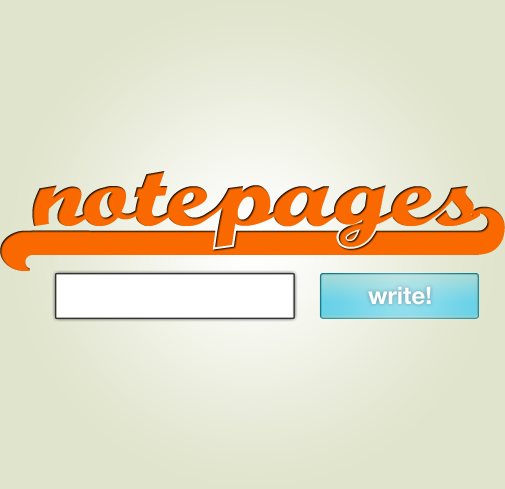
<style>
.page{position:relative;width:505px;height:489px;background:#e0e4cc}
.page>*{position:absolute;margin:0}
.t1{font:120px "TeamSpirit";color:#fa6900}
.t2{font:24px "HelveticaNeue-Bold";color:#ffffff}
</style>
<div class="page">
<p class="t1" style="left:0px;top:171px;width:505px;height:100px">(notepages)</p>
<p class="t2" style="left:368px;top:286px;width:63px;height:19px">write!</p>
</div>
